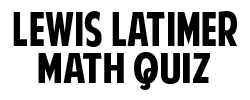
<style>
.page{position:relative;width:250px;height:100px;background:#ffffff}
.page>*{position:absolute;margin:0}
.t1{font:46.9px "AmericanPurpose";color:#000000;text-transform:uppercase;scale:0.86 1}
.t2{font:41.7px "AmericanPurpose";color:#000000;text-transform:uppercase}
</style>
<div class="page">
<p class="t1" style="left:13px;top:11px;width:224px;height:36px">Lewis Latimer</p>
<p class="t2" style="left:38px;top:52px;width:172px;height:38px">math quiz</p>
</div>
